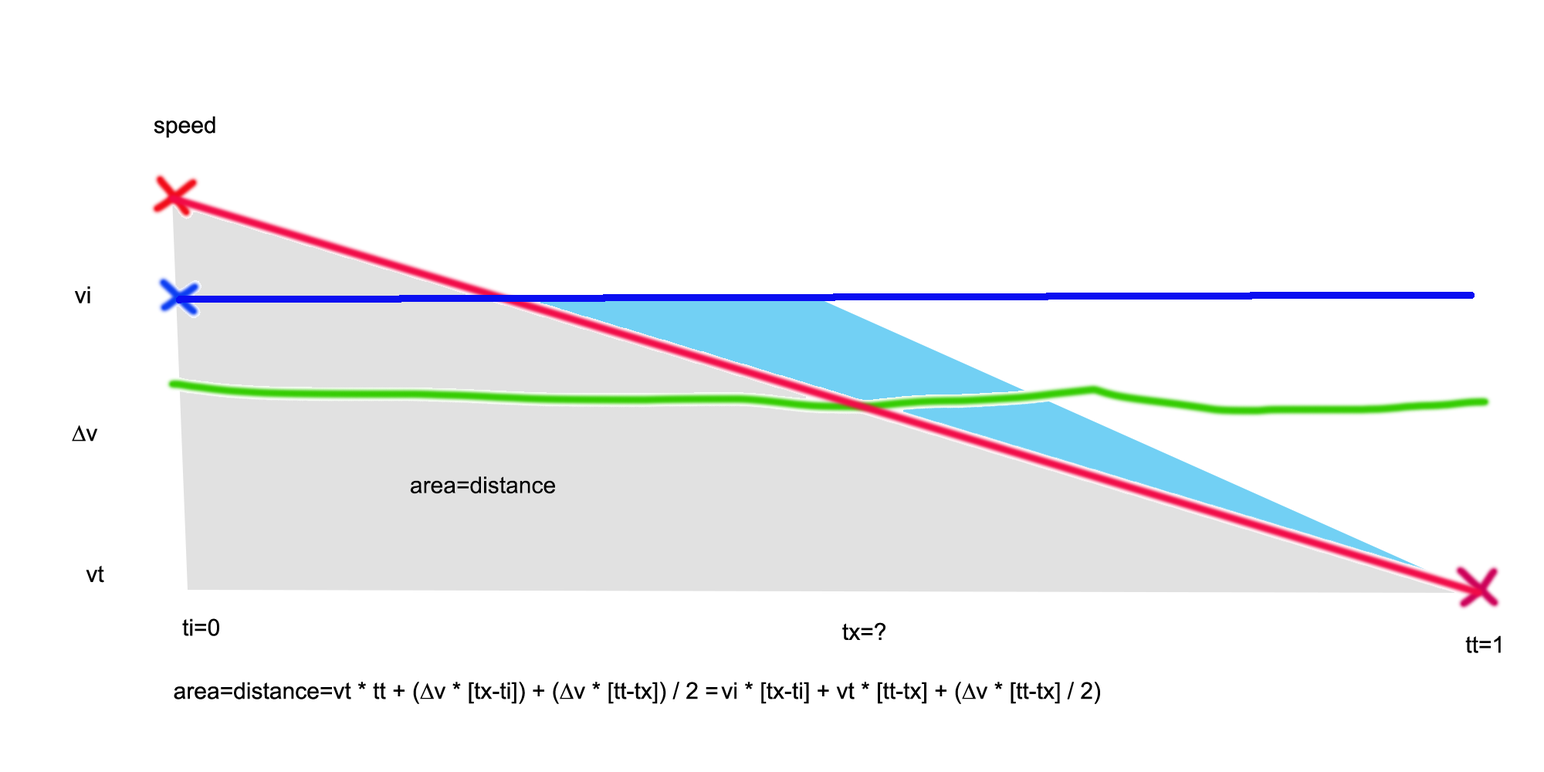
<style>
.page{position:relative;width:1544px;height:772px;background:#ffffff}
.page>*{position:absolute;margin:0}
.t1{font:23.2px "ArialMT";color:#000000}
</style>
<div class="page">
<p class="t1" style="left:154px;top:116px;width:61px;height:22px">speed</p>
<p class="t1" style="left:75px;top:286px;width:15px;height:17px">vi</p>
<p class="t1" style="left:72px;top:425px;width:26px;height:17px">∆v</p>
<p class="t1" style="left:410px;top:476px;width:145px;height:18px">area=distance</p>
<p class="t1" style="left:86px;top:565px;width:18px;height:18px">vt</p>
<p class="t1" style="left:182px;top:618px;width:37px;height:18px">ti=0</p>
<p class="t1" style="left:842px;top:622px;width:44px;height:18px">tx=?</p>
<p class="t1" style="left:1466px;top:635px;width:35px;height:18px">tt=1</p>
<p class="t1" style="left:174px;top:682px;width:926px;height:22px">area=distance=vt * tt + (∆v * [tx-ti]) + (∆v * [tt-tx]) / 2 = vi * [tx-ti] + vt * [tt-tx] + (∆v * [tt-tx] / 2)</p>
</div>
